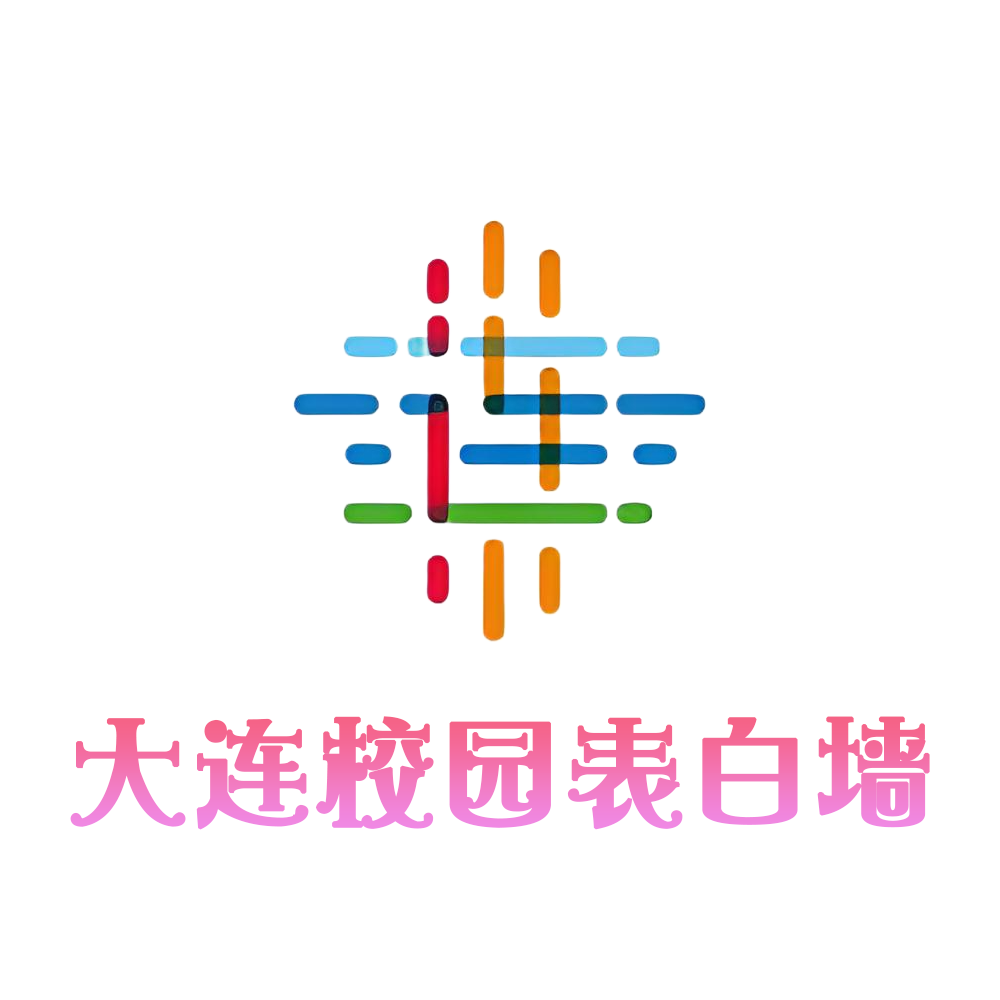
<style>
.page{position:relative;width:1000px;height:1000px;background:#ffffff}
.page>*{position:absolute;margin:0}
.t1{font:121px "DFShiYiW5";font-weight:bold}
</style>
<div class="page">
<p class="t1" style="left:70px;top:716px;width:860px;height:114px">大连校园表白墙</p>
</div>
